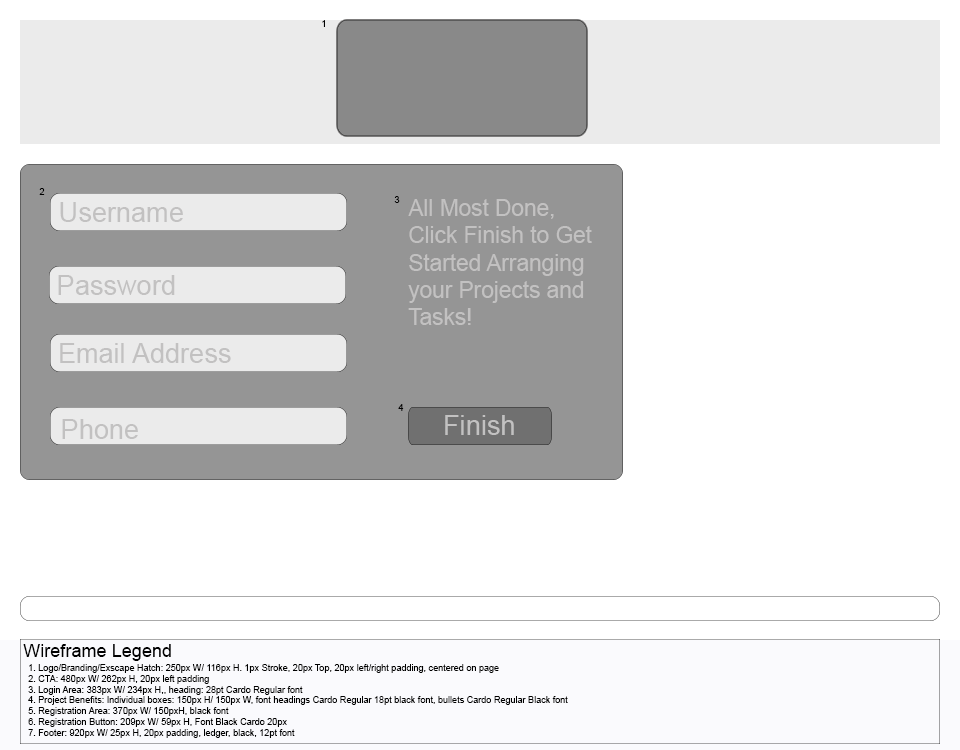
<style>
.page{position:relative;width:960px;height:750px;background:#ffffff}
.page>*{position:absolute;margin:0}
.t1{font:9.1px "ArialMT";color:#000000}
.t2{font:27.2px "ArialMT";color:#c2c1c1}
.t3{font:22.6px "ArialMT";color:#c2c1c1}
.t4{font:18.1px "ArialMT";color:#000000}
</style>
<div class="page">
<p class="t1" style="left:322px;top:20px;width:3px;height:7px">1</p>
<p class="t1" style="left:39px;top:188px;width:6px;height:7px">2</p>
<p class="t1" style="left:394px;top:196px;width:6px;height:7px">3</p>
<p class="t2" style="left:60px;top:202px;width:123px;height:20px">Username</p>
<p class="t3" style="left:408px;top:199px;width:184px;height:126px">All Most Done, <br>Click Finish to Get <br>Started Arranging <br>your Projects and <br>Tasks!</p>
<p class="t2" style="left:58px;top:275px;width:117px;height:20px">Password</p>
<p class="t2" style="left:60px;top:343px;width:171px;height:20px">Email Address</p>
<p class="t1" style="left:398px;top:404px;width:6px;height:7px">4</p>
<p class="t2" style="left:62px;top:419px;width:76px;height:20px">Phone</p>
<p class="t2" style="left:445px;top:415px;width:69px;height:20px">Finish</p>
<p class="t4" style="left:23px;top:644px;width:148px;height:17px">Wireframe Legend</p>
<p class="t1" style="left:28px;top:664px;width:540px;height:74px">1. Logo/Branding/Exscape Hatch: 250px W/ 116px H. 1px Stroke, 20px Top, 20px left/right padding, centered on page<br>2. CTA: 480px W/ 262px H, 20px left padding <br>3. Login Area: 383px W/ 234px H,, heading: 28pt Cardo Regular font<br>4. Project Benefits: Individual boxes: 150px H/ 150px W, font headings Cardo Regular 18pt black font, bullets Cardo Regular Black font <br>5. Registration Area: 370px W/ 150pxH, black font<br>6. Registration Button: 209px W/ 59px H, Font Black Cardo 20px<br>7. Footer: 920px W/ 25px H, 20px padding, ledger, black, 12pt font</p>
</div>
